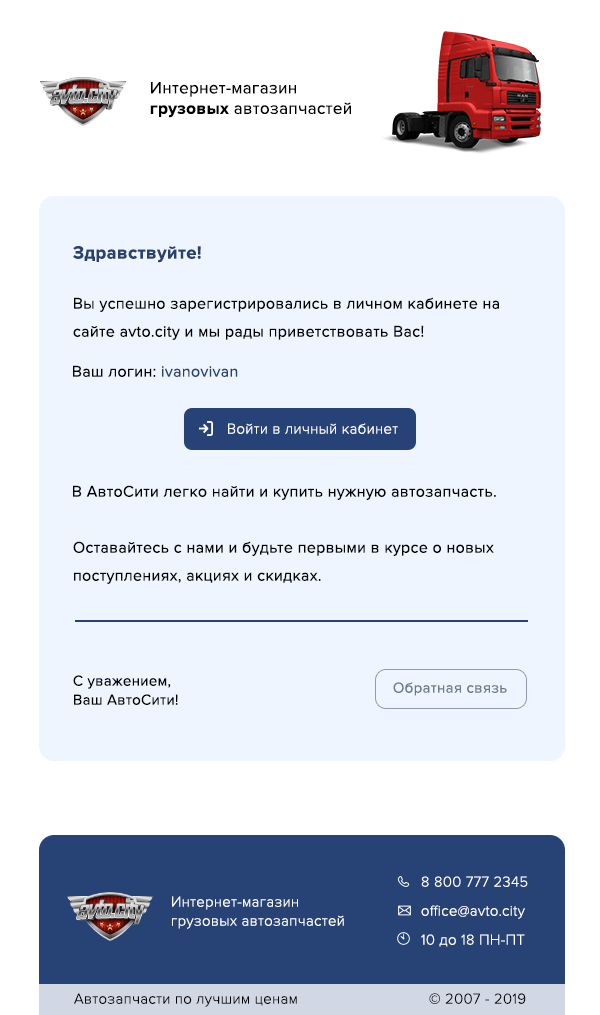
<style>
.page{position:relative;width:600px;height:1015px;background:#eef5ff}
.page>*{position:absolute;margin:0}
.t1{font:17px "ProximaNova-Regular";letter-spacing:0.02em;color:#000000}
.t2{font:17px "ProximaNova-Bold";letter-spacing:0.02em;color:#000000}
.t3{font:18.4px "ProximaNova-Bold";letter-spacing:0.02em;color:#2a416c}
.t4{font:16px/28px "ProximaNova-Regular";letter-spacing:0.02em;color:#000000}
.t5{font:16px "ProximaNova-Regular";letter-spacing:0.02em;color:#000000}
.t6{font:16px "ProximaNova-Regular";letter-spacing:0.02em;color:#284273}
.t7{font:15px "ProximaNova-Light";letter-spacing:0.02em;color:#ffffff}
.t8{font:15px/19px "ProximaNova-Regular";letter-spacing:0.02em;color:#000000}
.t9{font:15px "ProximaNova-Regular";letter-spacing:0.02em;color:#6d798d}
.t10{font:15px/29px "ProximaNova-Light";letter-spacing:0.02em;color:#ffffff}
.t11{font:15px/19px "ProximaNova-Light";letter-spacing:0.02em;color:#ffffff}
.t12{font:15px "ProximaNova-Light";letter-spacing:0.02em;color:#000000}
</style>
<div class="page">
<p class="t1" style="left:150px;top:82px;width:201px;height:36px">Интернет-магазин<br><span class="t2">грузовых </span>автозапчастей</p>
<p class="t3" style="left:73px;top:246px;width:128px;height:17px">Здравствуйте!</p>
<p class="t4" style="left:73px;top:297px;width:426px;height:43px">Вы успешно зарегистрировались в личном кабинете на<br>сайте avto.city и мы рады приветствовать Вас!</p>
<p class="t5" style="left:73px;top:365px;width:165px;height:12px">Ваш логин: <span class="t6">ivanovivan</span></p>
<p class="t7" style="left:228px;top:423px;width:170px;height:11px">Войти в личный кабинет</p>
<p class="t5" style="left:73px;top:485px;width:423px;height:15px">В АвтоСити легко найти и купить нужную автозапчасть.</p>
<p class="t4" style="left:73px;top:541px;width:421px;height:43px">Оставайтесь с нами и будьте первыми в курсе о новых<br>поступлениях, акциях и скидках.</p>
<p class="t8" style="left:73px;top:675px;width:105px;height:30px">С уважением,<br>Ваш АвтоСити!</p>
<p class="t9" style="left:393px;top:682px;width:114px;height:14px">Обратная связь</p>
<p class="t10" style="left:421px;top:876px;width:107px;height:71px">8 800 777 2345<br>office@avto.city<br>10 до 18 ПН-ПТ</p>
<p class="t11" style="left:172px;top:896px;width:172px;height:33px">Интернет-магазин<br>грузовых автозапчастей</p>
<p class="t12" style="left:74px;top:993px;width:223px;height:14px">Автозапчасти по лучшим ценам</p>
<p class="t12" style="left:429px;top:993px;width:97px;height:11px">© 2007 - 2019</p>
</div>
